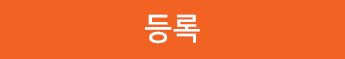
<style>
.page{position:relative;width:345px;height:59px;background:#f26222}
.page>*{position:absolute;margin:0}
.t1{font:31px "NanumSquareB";color:#ffffff}
</style>
<div class="page">
<p class="t1" style="left:145px;top:14px;width:55px;height:30px">등록</p>
</div>
